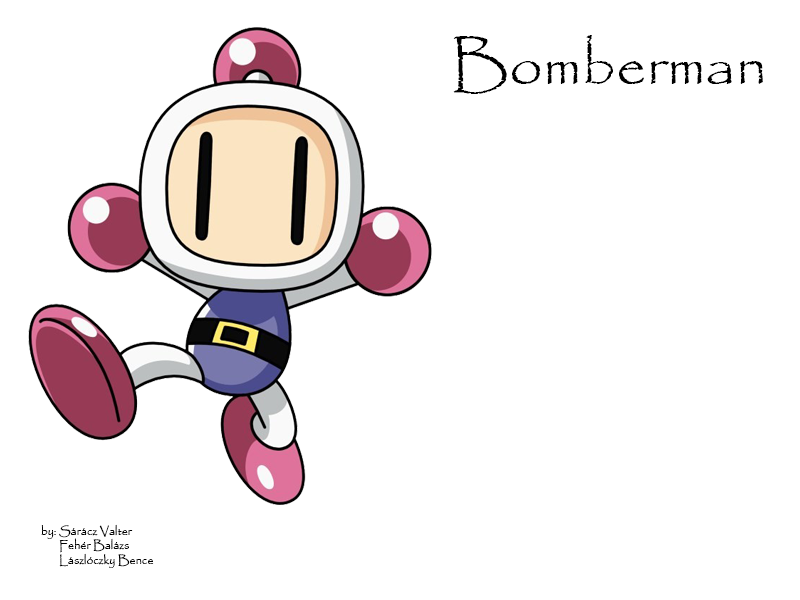
<style>
.page{position:relative;width:800px;height:600px;background:#ffffff}
.page>*{position:absolute;margin:0}
.t1{font:60px "Papyrus-Regular";color:#000000}
.t2{font:12px "Papyrus-Regular";color:#000000}
</style>
<div class="page">
<p class="t1" style="left:453px;top:35px;width:310px;height:59px">Bomberman</p>
<p class="t2" style="left:41px;top:524px;width:113px;height:44px">by: Sárácz Valter<br>       Fehér Balázs<br>       Lászlóczky Bence</p>
</div>
